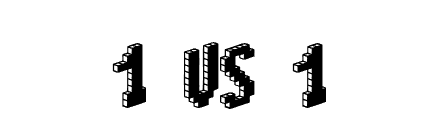
<style>
.page{position:relative;width:440px;height:140px;background:#ffffff}
.page>*{position:absolute;margin:0}
.t1{font:73px "Blox-BRK";color:#000000}
</style>
<div class="page">
<p class="t1" style="left:112px;top:42px;width:214px;height:67px">1 vs 1</p>
</div>
